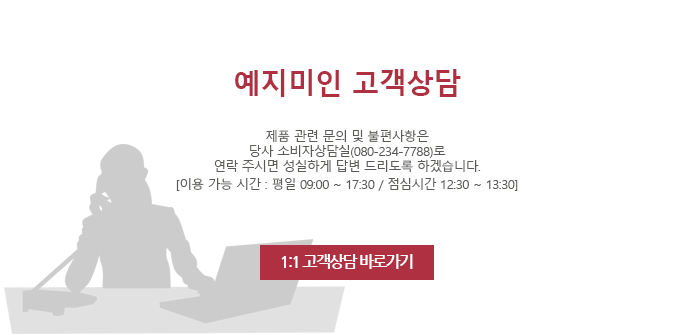
<style>
.page{position:relative;width:695px;height:335px;background:#ffffff}
.page>*{position:absolute;margin:0}
.t1{font:28px "MalgunGothicBold";letter-spacing:-0.025em;color:#af3041}
.t2{font:12.5px "MalgunGothic";letter-spacing:-0.023em;color:#595b56}
.t3{font:12.5px/18px "MalgunGothic";letter-spacing:-0.023em;color:#595b56}
</style>
<div class="page">
<p class="t1" style="left:235px;top:69px;width:226px;height:28px">예지미인 고객상담</p>
<p class="t2" style="left:176px;top:130px;width:342px;height:61px;text-align:center">제품 관련 문의 및 불편사항은<br>당사 소비자상담실(080-234-7788)로<br>연락 주시면 성실하게 답변 드리도록 하겠습니다.<br><span class="t3">[이용 가능 시간 : 평일 09:00 ~ 17:30 / 점심시간 12:30 ~ 13:30]</span></p>
</div>
